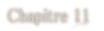
<style>
.page{position:relative;width:104px;height:31px;background:#ffffff}
.page>*{position:absolute;margin:0}
.t1{font:19px "MS-PMincho";color:#d6cdc1;font-weight:bold;scale:0.84 1}
</style>
<div class="page">
<p class="t1" style="left:8px;top:8px;width:81px;height:17px">Chapitre 11</p>
</div>
